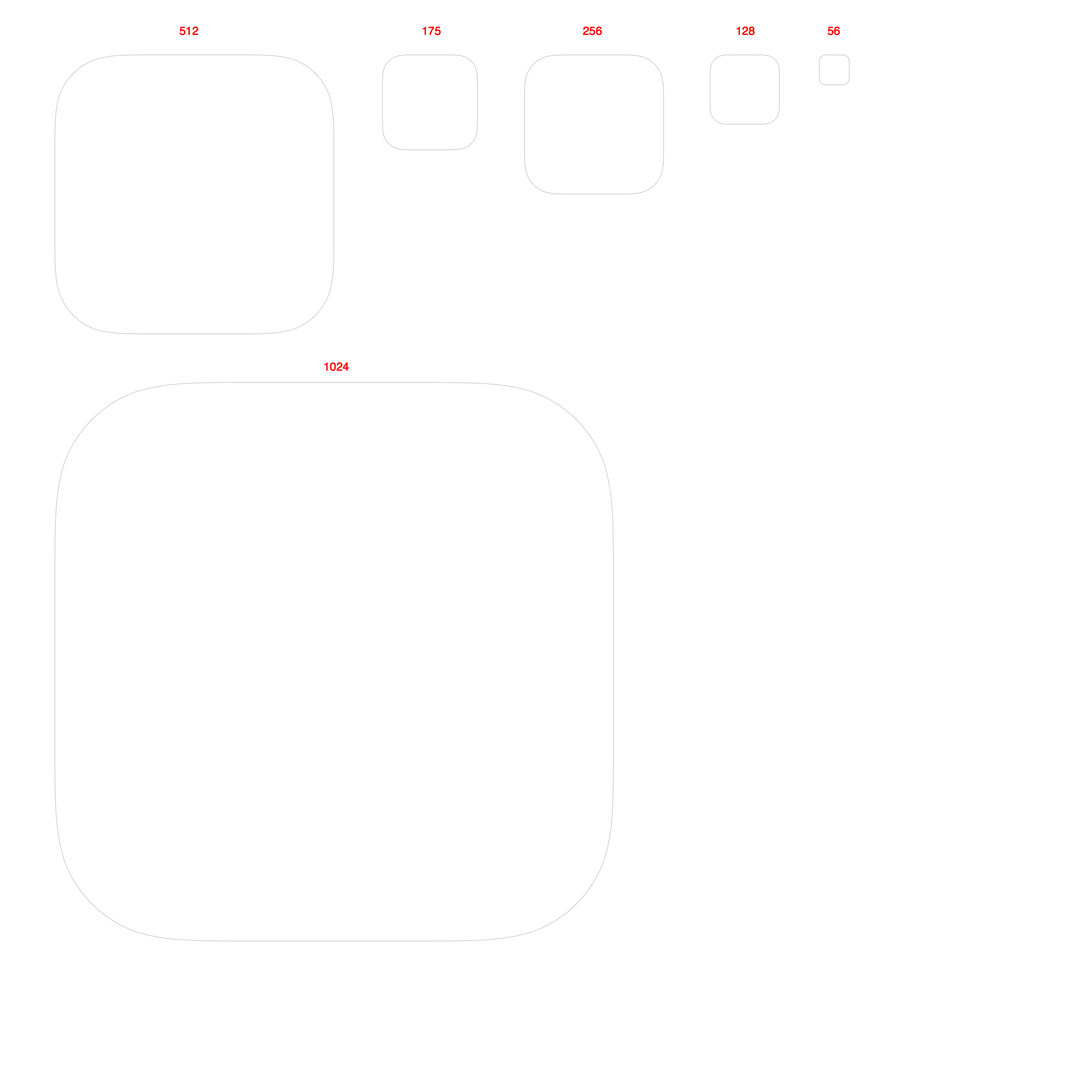
<style>
.page{position:relative;width:1092px;height:1092px;background:#ffffff}
.page>*{position:absolute;margin:0}
.t1{font:11.5px "Helvetica";color:#ff0000}
</style>
<div class="page">
<p class="t1" style="left:179px;top:26px;width:20px;height:9px">512</p>
<p class="t1" style="left:423px;top:26px;width:18px;height:9px">175</p>
<p class="t1" style="left:583px;top:26px;width:19px;height:9px">256</p>
<p class="t1" style="left:737px;top:26px;width:18px;height:9px">128</p>
<p class="t1" style="left:827px;top:26px;width:13px;height:9px">56</p>
<p class="t1" style="left:324px;top:362px;width:25px;height:9px">1024</p>
</div>
